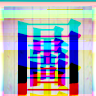
<style>
.page{position:relative;width:96px;height:96px}
.page>*{position:absolute;margin:0}
.t1{font:73.7px "FZCYSFW--GB1-0"}
</style>
<div class="page">
<p class="t1" style="left:17px;top:16px;width:64px;height:66px">图</p>
</div>
